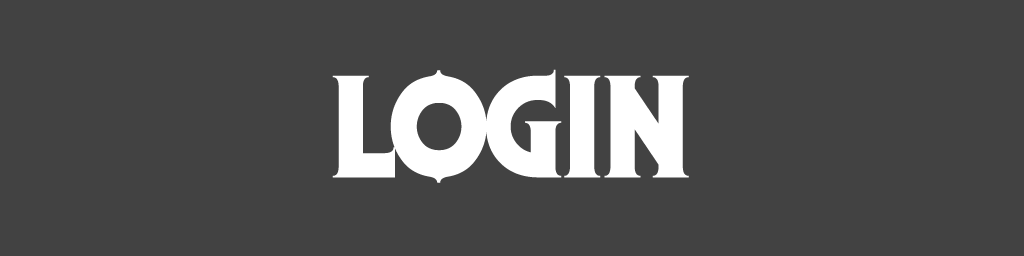
<style>
.page{position:relative;width:1024px;height:256px;background:#424242}
.page>*{position:absolute;margin:0}
.t1{font:120px "EvilDead";color:#ffffff}
</style>
<div class="page">
<p class="t1" style="left:332px;top:69px;width:357px;height:114px">Login</p>
</div>
